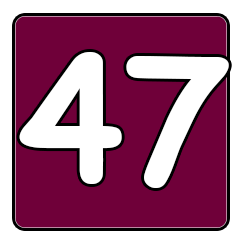
<style>
.page{position:relative;width:240px;height:240px;background:#6f0039}
.page>*{position:absolute;margin:0}
.t1{font:171.4px "ComicSansMS-Bold";color:#ffffff}
</style>
<div class="page">
<p class="t1" style="left:19px;top:51px;width:210px;height:137px">47</p>
</div>
